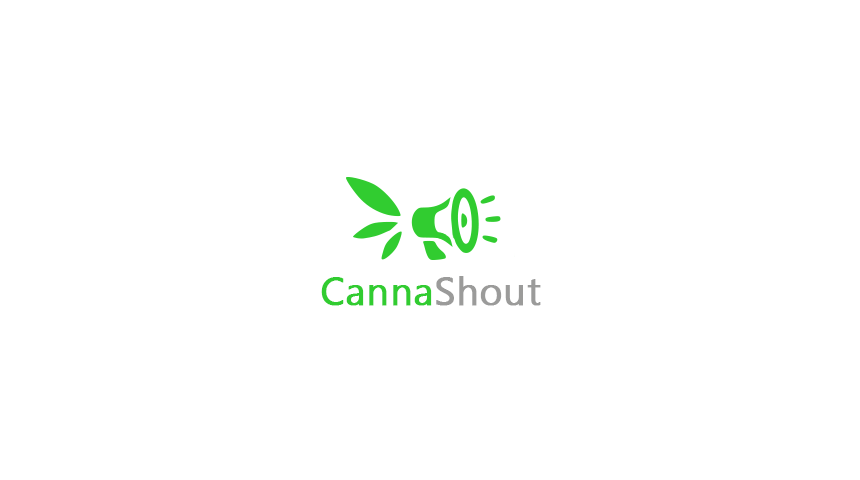
<style>
.page{position:relative;width:860px;height:480px;background:#ffffff}
.page>*{position:absolute;margin:0}
.t1{font:39.3px "MicrosoftTaiLe";color:#31cc30;font-weight:bold}
.t2{font:39.3px "MicrosoftTaiLe";color:#9b9b9a;font-weight:bold}
</style>
<div class="page">
<p class="t1" style="left:321px;top:276px;width:220px;height:30px">Canna<span class="t2">Shout</span></p>
</div>
